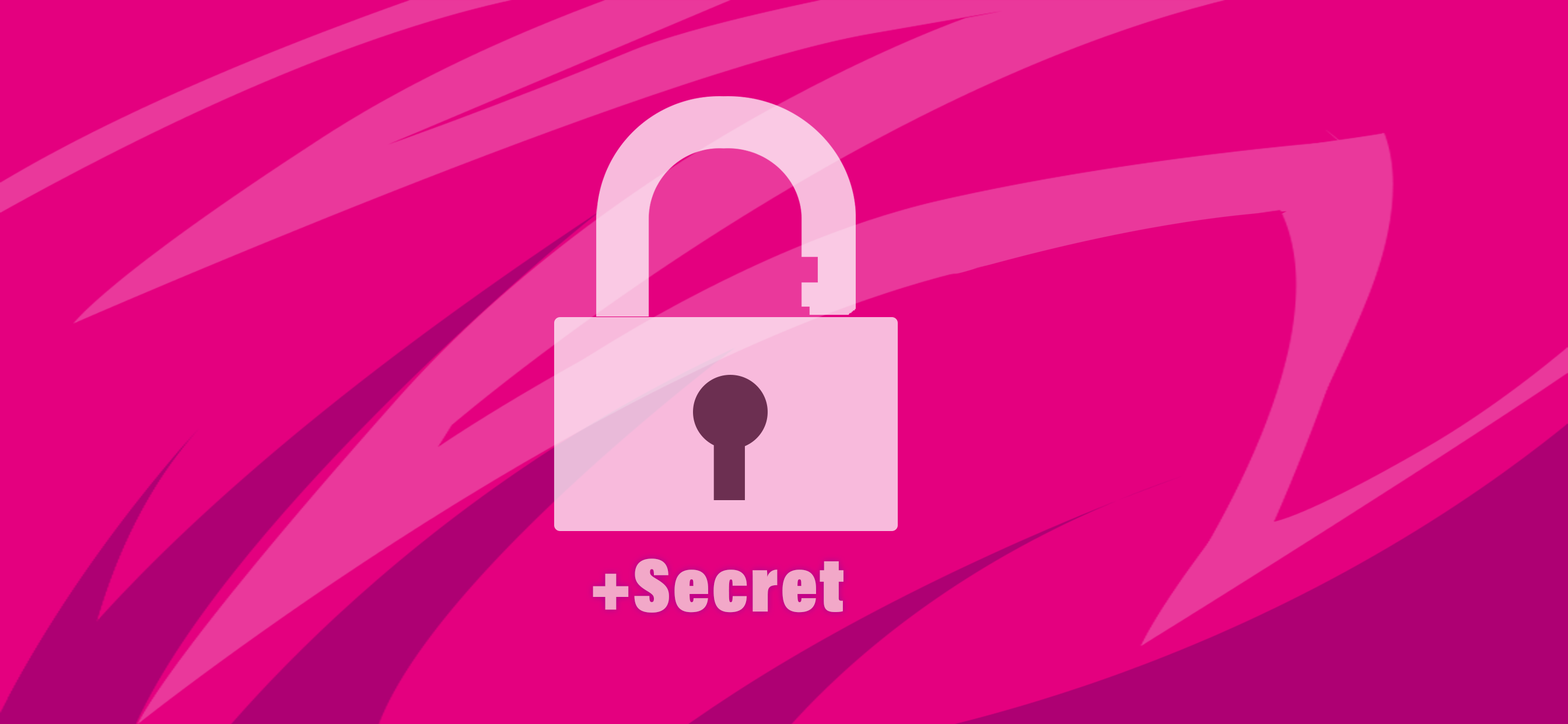
<style>
.page{position:relative;width:1568px;height:724px;background:#e4007f}
.page>*{position:absolute;margin:0}
.t1{font:76.7px "AcuminConcept-CondensedUltraBlack";letter-spacing:0.025em;color:#f2a8c8}
</style>
<div class="page">
<p class="t1" style="left:593px;top:559px;width:251px;height:54px">+Secret</p>
</div>
